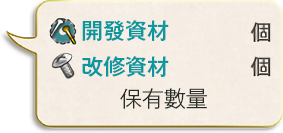
<style>
.page{position:relative;width:283px;height:133px}
.page>*{position:absolute;margin:0}
.t1{font:22px/36px "GothicMB101Pr6N-Medium";color:#0a979f}
.t2{font:22px "GothicMB101Pr6N-Light";color:#272c26}
</style>
<div class="page">
<p class="t1" style="left:82px;top:20px;width:87px;height:57px">開發資材<br>改修資材</p>
<p class="t2" style="left:120px;top:88px;width:87px;height:21px">保有數量</p>
</div>
